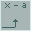
<style>
.page{position:relative;width:31px;height:31px;background:#a7b6b5}
.page>*{position:absolute;margin:0}
.t1{font:10px "rktr6cd";color:#3e6764}
</style>
<div class="page">
<p class="t1" style="left:5px;top:3px;width:21px;height:5px">x - a</p>
</div>
